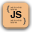
<style>
.page{position:relative;width:32px;height:32px;background:#f3bc85}
.page>*{position:absolute;margin:0}
.t1{font:7.3px "Helvetica"}
.t2{font:1.8px "Helvetica";color:#9f7b58}
.t3{font:9.1px "Helvetica-Bold";color:#111111}
</style>
<div class="page">
<p class="t1" style="left:6px;top:5px;width:4px;height:8px">{</p>
<p class="t2" style="left:10px;top:6px;width:12px;height:5px">var foo = bar;<br>baz foo</p>
<p class="t3" style="left:10px;top:11px;width:12px;height:7px">JS</p>
<p class="t1" style="left:23px;top:17px;width:3px;height:8px">}</p>
<p class="t2" style="left:10px;top:19px;width:12px;height:5px">var foo = bar;<br>baz foo</p>
</div>
